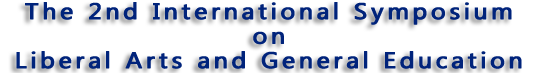
<style>
.page{position:relative;width:542px;height:73px;background:#ffffff}
.page>*{position:absolute;margin:0}
.t1{font:21px "MicrosoftYaHei";letter-spacing:0.165em;color:#00237b;font-weight:bold;scale:1.1 1}
</style>
<div class="page">
<p class="t1" style="left:16px;top:2px;width:506px;height:67px;text-align:center">The 2nd International Symposium<br>on<br>Liberal Arts and General Education</p>
</div>
